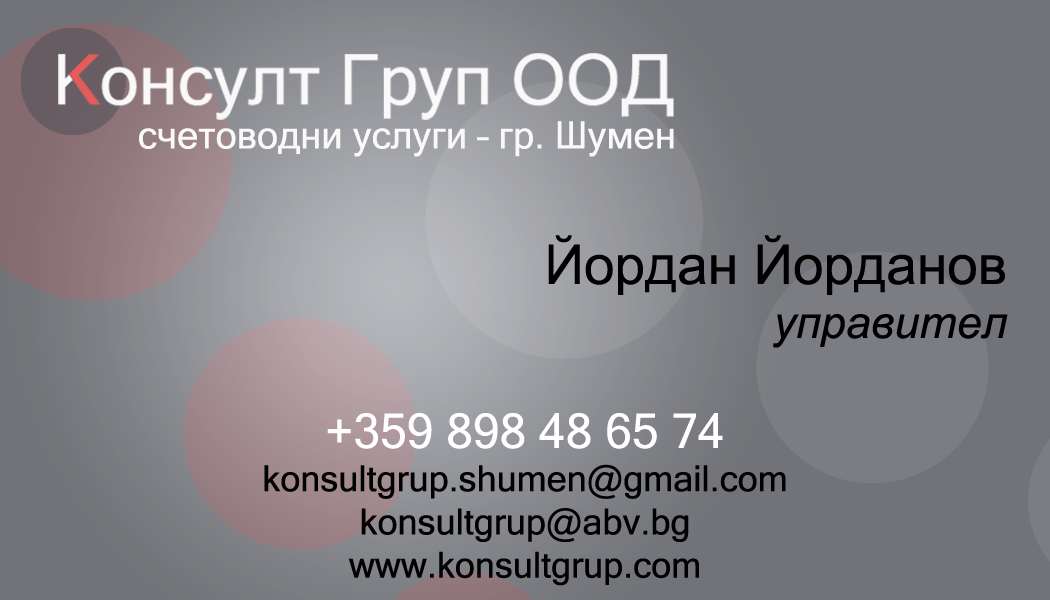
<style>
.page{position:relative;width:1050px;height:600px;background:#727378}
.page>*{position:absolute;margin:0}
.t1{font:38px "MicrosoftSansSerif";color:#f9f9f9}
.t2{font:55px "ArialMT";color:#000000}
.t3{font:45px "Arial-ItalicMT";color:#000000}
.t4{font:36px "MicrosoftSansSerif";color:#010101}
.t5{font:48px "MicrosoftSansSerif";color:#ffffff}
</style>
<div class="page">
<p class="t1" style="left:139px;top:121px;width:535px;height:36px">счетоводни услуги – гр. Шумен</p>
<p class="t2" style="left:548px;top:235px;width:460px;height:113px;text-align:right">Йордан Йорданов<br><span class="t3">управител</span></p>
<p class="t4" style="left:264px;top:413px;width:522px;height:173px;text-align:center"><span class="t5">+359 898 48 65 74<br></span>konsultgrup.shumen@gmail.com<br>konsultgrup@abv.bg<br>www.konsultgrup.com</p>
</div>
